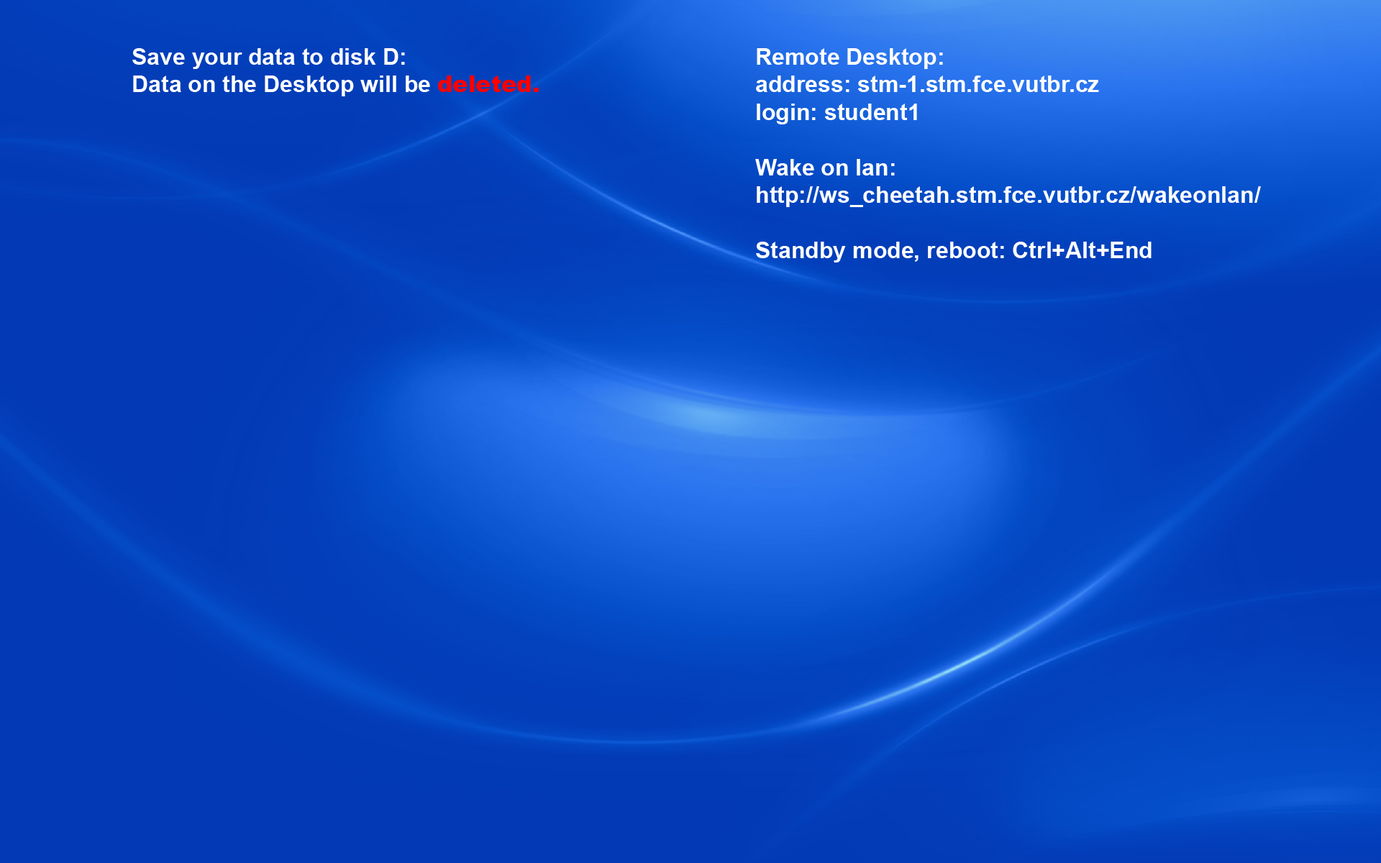
<style>
.page{position:relative;width:1381px;height:863px}
.page>*{position:absolute;margin:0}
.t1{font:23px "Arial-BoldMT";color:#ffffff}
.t2{font:23px "Arial-Black";color:#ff0000}
</style>
<div class="page">
<p class="t1" style="left:132px;top:48px;width:407px;height:48px">Save your data to disk D:<br>Data on the Desktop will be <span class="t2">deleted.</span></p>
<p class="t1" style="left:755px;top:48px;width:506px;height:215px">Remote Desktop:<br>address: stm-1.stm.fce.vutbr.cz<br>login: student1<br><br>Wake on lan:<br>http://ws_cheetah.stm.fce.vutbr.cz/wakeonlan/<br><br>Standby mode, reboot: Ctrl+Alt+End</p>
</div>
